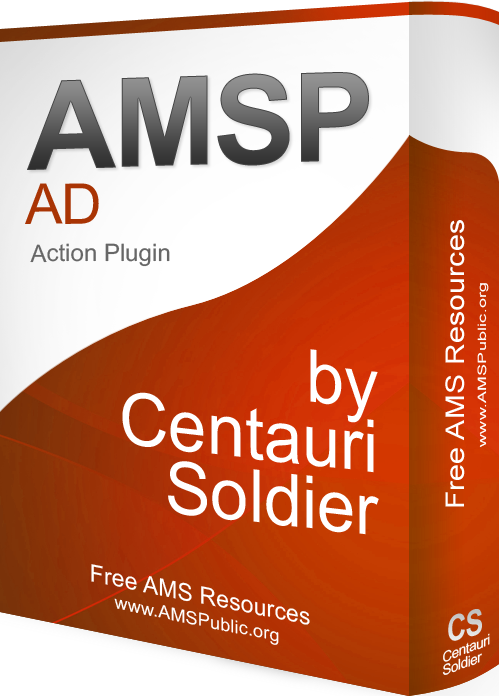
<style>
.page{position:relative;width:499px;height:696px}
.page>*{position:absolute;margin:0}
.t1{font:123.8px "Arial-BoldMT";letter-spacing:-0.025em}
.t2{font:56.3px "ArialMT";letter-spacing:-0.025em;color:#a93404}
.t3{font:25.9px "ArialMT";letter-spacing:0.01em;color:#ffffff;scale:1.16 1}
.t4{font:24px "ArialMT";color:#676767}
.t5{font:11.5px "ArialMT";letter-spacing:0.01em;color:#ffffff;scale:1.56 1}
.t6{font:72.9px/63.2px "ArialMT";color:#ffffff;scale:0.95 1}
.t7{font:24px "ArialMT";letter-spacing:0.01em;color:#ffffff;scale:0.97 1}
.t8{font:18px "ArialMT";letter-spacing:0.01em;color:#ffffff}
.t9{font:35.7px "Arial-BoldMT";letter-spacing:-0.025em;color:#d2d2d2;scale:0.78 1}
.t10{font:14.7px/6.9px "ArialMT";letter-spacing:-0.025em;color:#ffffff;scale:0.96 1}
</style>
<div class="page">
<p class="t1" style="left:27px;top:72px;width:342px;height:98px;rotate:-2deg">AMSP</p>
<p class="t2" style="left:25px;top:183px;width:74px;height:41px;rotate:-1deg">AD</p>
<p class="t3" style="left:445px;top:220px;width:20px;height:287px;rotate:-90deg">Free AMS Resources</p>
<p class="t4" style="left:30px;top:243px;width:140px;height:24px">Action Plugin</p>
<p class="t5" style="left:477px;top:283px;width:12px;height:164px;rotate:-90deg">www.AMSPublic.org</p>
<p class="t6" style="left:122px;top:349px;width:257px;height:186px;text-align:right;rotate:7deg">by<br>Centauri<br>Soldier</p>
<p class="t7" style="left:91px;top:564px;width:219px;height:61px;rotate:11deg">Free AMS Resources</p>
<p class="t8" style="left:114px;top:598px;width:165px;height:47px;rotate:11deg">www.AMSPublic.org</p>
<p class="t9" style="left:448px;top:609px;width:34px;height:32px;rotate:-17deg">CS</p>
<p class="t10" style="left:442px;top:633px;width:48px;height:42px;rotate:-21deg">Centauri<br><br>Soldier</p>
</div>
